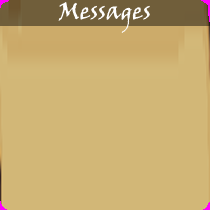
<style>
.page{position:relative;width:210px;height:210px;background:#d2b777}
.page>*{position:absolute;margin:0}
.t1{font:24px "VinerHandITC";color:#ffffff}
</style>
<div class="page">
<p class="t1" style="left:58px;top:2px;width:92px;height:31px">Messages</p>
</div>
